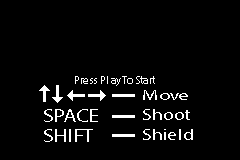
<style>
.page{position:relative;width:240px;height:160px;background:#000000}
.page>*{position:absolute;margin:0}
.t1{font:11.2px "MyriadPro-Regular";color:#ffffff}
.t2{font:14.6px "MyriadPro-Regular";color:#ffffff;scale:1.41 1}
.t3{font:18.9px "MyriadPro-Regular";color:#ffffff;scale:1.17 1}
.t4{font:15.6px "MyriadPro-Regular";color:#ffffff;scale:1.28 1}
</style>
<div class="page">
<p class="t1" style="left:75px;top:76px;width:80px;height:10px">Press Pl ay To Start</p>
<p class="t2" style="left:143px;top:90px;width:45px;height:10px">Move</p>
<p class="t3" style="left:44px;top:109px;width:54px;height:13px">SPACE</p>
<p class="t4" style="left:143px;top:109px;width:47px;height:11px">Shoot</p>
<p class="t3" style="left:44px;top:129px;width:49px;height:13px">SHIFT</p>
<p class="t4" style="left:143px;top:129px;width:50px;height:11px">Shield</p>
</div>
